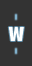
<style>
.page{position:relative;width:32px;height:66px;background:#333333}
.page>*{position:absolute;margin:0}
.t1{font:18px "Impact";color:#ffffff}
</style>
<div class="page">
<p class="t1" style="left:8px;top:27px;width:16px;height:14px">W</p>
</div>
